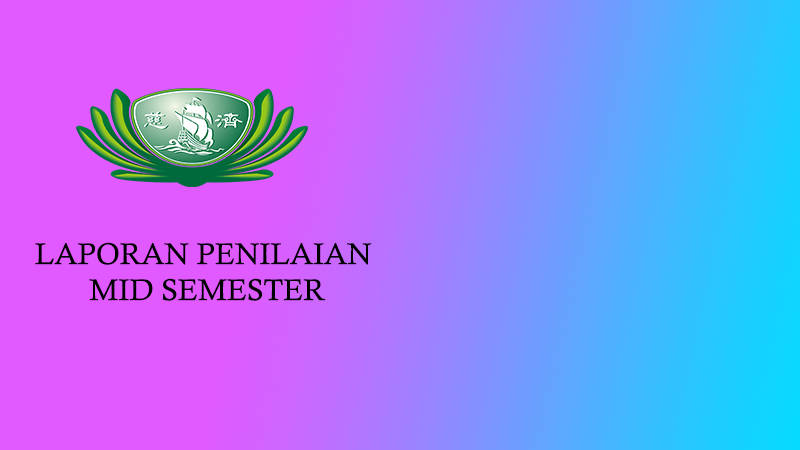
<style>
.page{position:relative;width:800px;height:450px;background:#e15aff}
.page>*{position:absolute;margin:0}
.t1{font:30px "CalistoMT";color:#000000}
</style>
<div class="page">
<p class="t1" style="left:35px;top:242px;width:337px;height:59px;text-align:center">LAPORAN PENILAIAN <br>MID SEMESTER</p>
</div>
